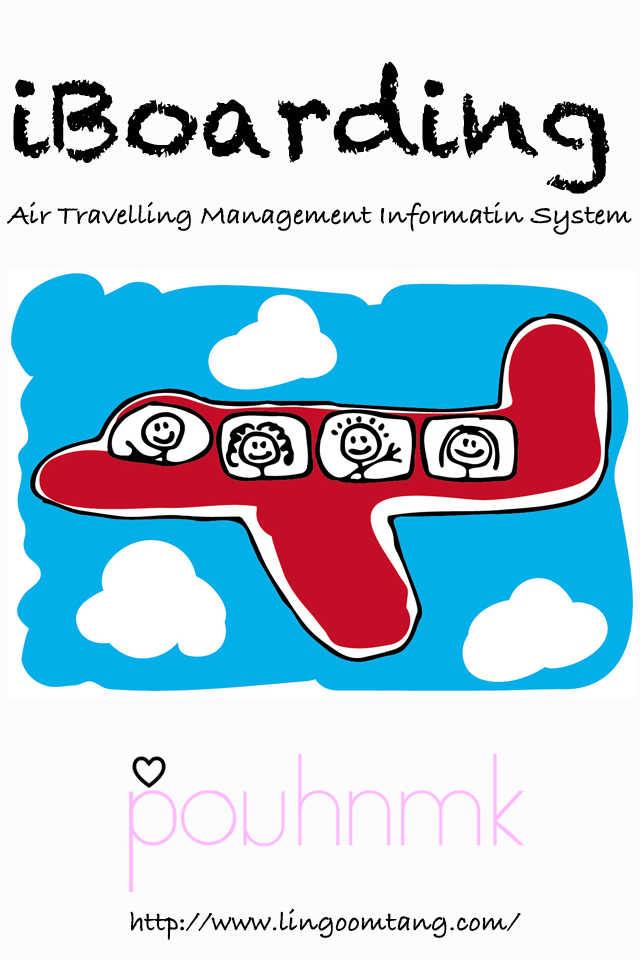
<style>
.page{position:relative;width:640px;height:960px;background:#fdfcfd}
.page>*{position:absolute;margin:0}
.t1{font:108.3px "Chalkduster";color:#010101}
.t2{font:108.3px "BradleyHandITCTTBold";color:#010101}
.t3{font:29.2px "BradleyHandITCTTBold";color:#010101}
</style>
<div class="page">
<p class="t1" style="left:13px;top:61px;width:597px;height:133px"><span class="t2"> </span>iBoarding</p>
<p class="t3" style="left:7px;top:201px;width:625px;height:34px">Air Travelling Management Informatin System</p>
<p class="t3" style="left:130px;top:908px;width:391px;height:32px">http://www.lingoomtang.com/</p>
</div>
